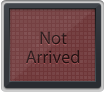
<style>
.page{position:relative;width:106px;height:95px}
.page>*{position:absolute;margin:0}
.t1{font:18px/18px "MyriadPro-Regular";color:#281617}
</style>
<div class="page">
<p class="t1" style="left:26px;top:31px;width:53px;height:33px;text-align:center">Not<br>Arrived</p>
</div>
